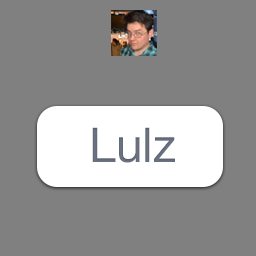
<style>
.page{position:relative;width:256px;height:256px;background:#808080}
.page>*{position:absolute;margin:0}
.t1{font:48px "HelveticaNeue";letter-spacing:-0.005em;color:#676e7d}
</style>
<div class="page">
<p class="t1" style="left:92px;top:127px;width:83px;height:36px">Lulz</p>
</div>
